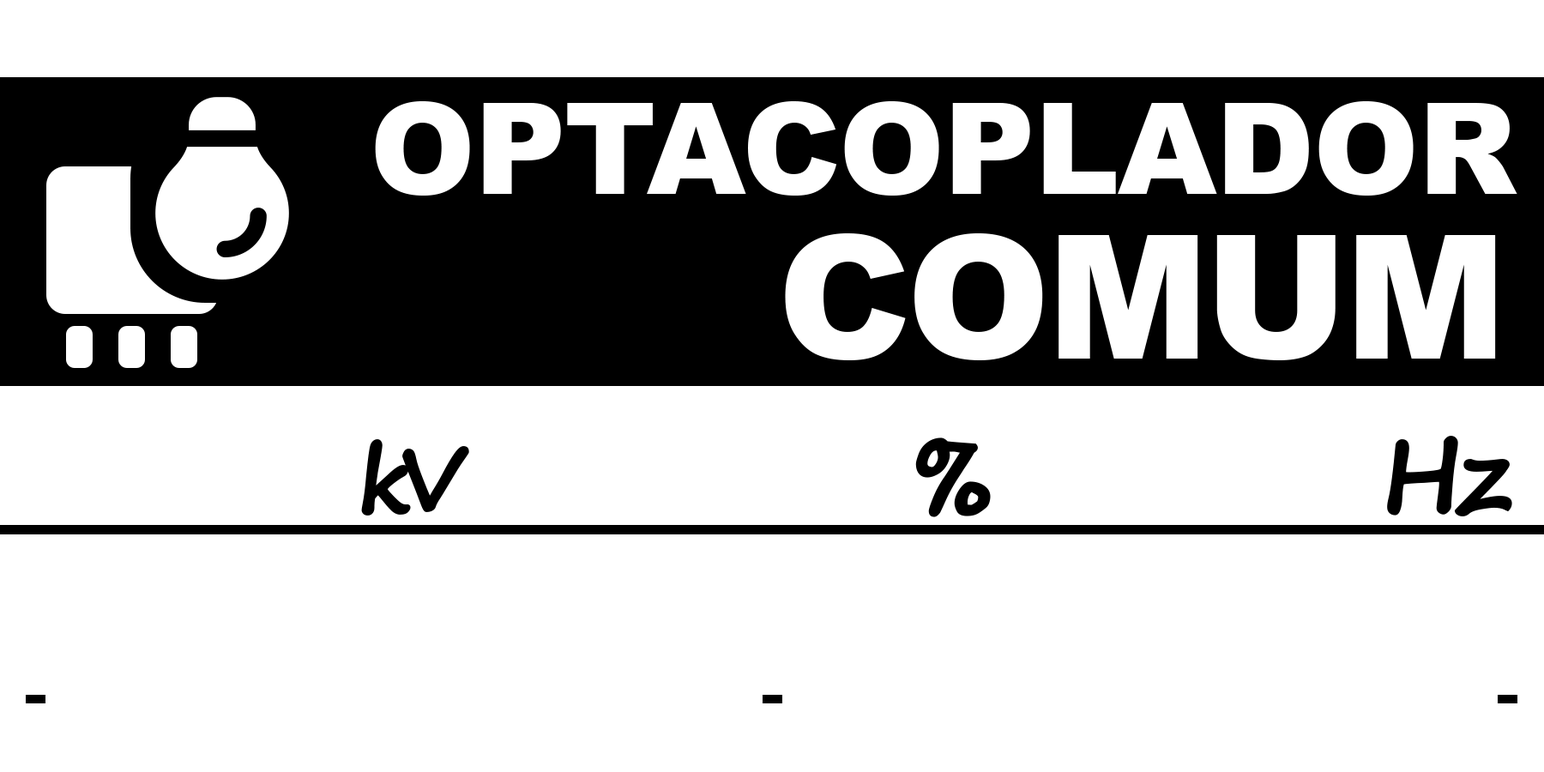
<style>
.page{position:relative;width:1544px;height:772px;background:#ffffff}
.page>*{position:absolute;margin:0}
.t1{font:127.1px "Arial-Black";letter-spacing:-0.01em;color:#ffffff}
.t2{font:172.5px "Arial-Black";letter-spacing:-0.025em;color:#ffffff}
.t3{font:200.1px "SegoePrint-Bold";letter-spacing:-0.01em;color:#000000;font-weight:bold}
.t4{font:99.5px "SegoePrint-Bold";letter-spacing:-0.025em;color:#000000;font-weight:bold}
.t5{font:87.6px "SegoePrint-Bold";letter-spacing:-0.15em;color:#000000;font-weight:bold}
</style>
<div class="page">
<p class="t1" style="left:375px;top:101px;width:1143px;height:95px">OPTACOPLADOR</p>
<p class="t2" style="left:785px;top:233px;width:711px;height:127px">COMUM</p>
<p class="t3" style="left:915px;top:438px;width:76px;height:79px">%</p>
<p class="t4" style="left:1387px;top:436px;width:126px;height:80px">Hz</p>
<p class="t5" style="left:361px;top:439px;width:108px;height:77px">kV</p>
</div>
